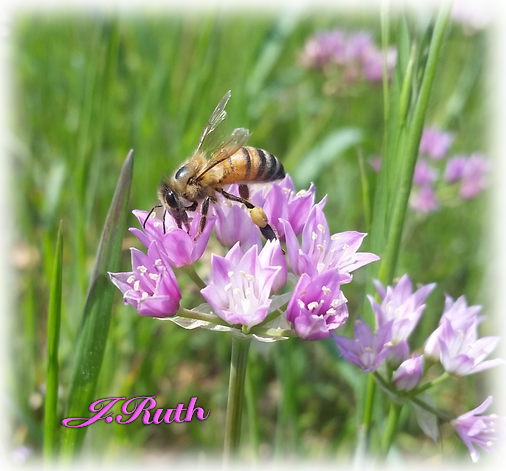
<style>
.page{position:relative;width:506px;height:471px}
.page>*{position:absolute;margin:0}
.t1{font:34.1px "SnellRoundhand-Black";letter-spacing:-0.03em;color:#fc5afa}
</style>
<div class="page">
<p class="t1" style="left:61px;top:396px;width:149px;height:32px">J.Ruth</p>
</div>
